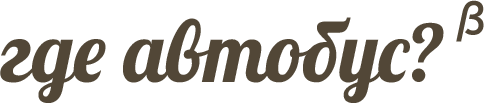
<style>
.page{position:relative;width:484px;height:103px;background:#ffffff}
.page>*{position:absolute;margin:0}
.t1{font:52.9px "Mathematica1Mono-Bold";color:#524838}
.t2{font:84.5px "Lobster";color:#524838}
</style>
<div class="page">
<p class="t1" style="left:456px;top:0px;width:28px;height:42px">b</p>
<p class="t2" style="left:0px;top:17px;width:444px;height:86px">где автобус?</p>
</div>
